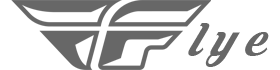
<style>
.page{position:relative;width:280px;height:70px;background:#ffffff}
.page>*{position:absolute;margin:0}
.t1{font:61.3px "KrinkesRegularPERSONALUSE";letter-spacing:0.16em;color:#676767;font-style:italic}
</style>
<div class="page">
<p class="t1" style="left:188px;top:23px;width:81px;height:44px">lye</p>
</div>
